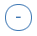
<style>
.page{position:relative;width:37px;height:36px;background:#ffffff}
.page>*{position:absolute;margin:0}
.t1{font:18px "MyriadPro-Regular";color:#3e78b3}
</style>
<div class="page">
<p class="t1" style="left:16px;top:16px;width:5px;height:2px">-</p>
</div>
